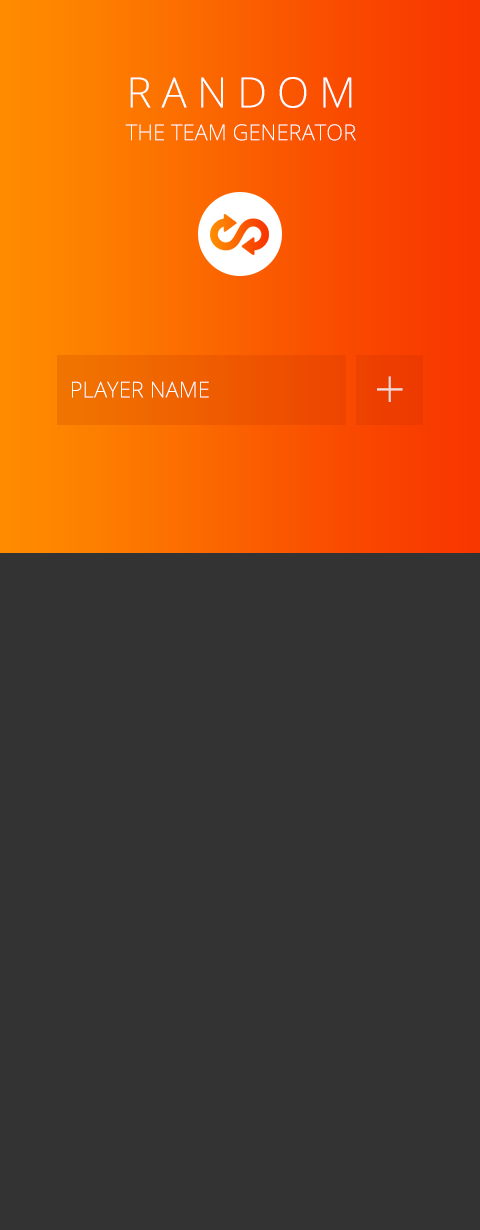
<style>
.page{position:relative;width:480px;height:1230px;background:#333333}
.page>*{position:absolute;margin:0}
.t1{font:42px "OpenSans-Light";letter-spacing:0.24em;color:#ffffff}
.t2{font:22px "OpenSans-Light";color:#ffffff}
.t3{font:55px "OpenSans-Light";color:#f2dbd4;text-transform:uppercase}
.t4{font:22px "OpenSans-Light";color:#ffffff;text-transform:uppercase}
</style>
<div class="page">
<p class="t1" style="left:130px;top:77px;width:222px;height:31px">RANDOM</p>
<p class="t2" style="left:125px;top:124px;width:231px;height:17px">THE TEAM GENERATOR</p>
<p class="t3" style="left:377px;top:376px;width:26px;height:26px">+</p>
<p class="t4" style="left:72px;top:381px;width:137px;height:17px">Player Name</p>
</div>
